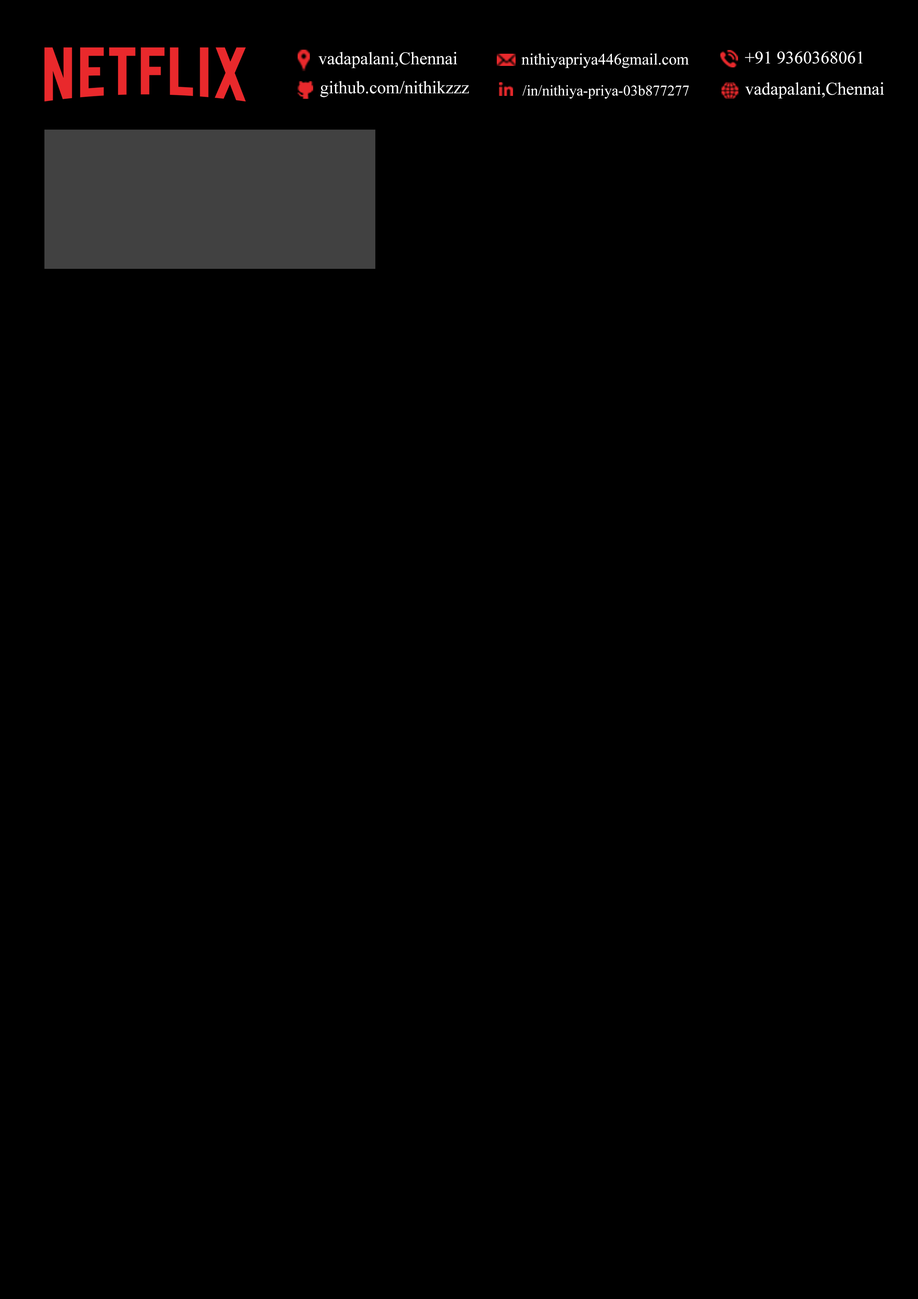
<style>
.page{position:relative;width:918px;height:1299px;background:#000000}
.page>*{position:absolute;margin:0}
.t1{font:17.7px "TimesNewRomanPSMT";color:#ffffff}
.t2{font:15.9px "TimesNewRomanPSMT";color:#ffffff}
.t3{font:14.8px "TimesNewRomanPSMT";color:#ffffff}
</style>
<div class="page">
<p class="t1" style="left:318px;top:52px;width:139px;height:16px">vadapalani,Chennai</p>
<p class="t2" style="left:521px;top:53px;width:168px;height:15px">nithiyapriya446gmail.com</p>
<p class="t1" style="left:745px;top:51px;width:118px;height:13px">+91 9360368061</p>
<p class="t1" style="left:320px;top:81px;width:149px;height:16px">github.com/nithikzzz</p>
<p class="t3" style="left:522px;top:85px;width:167px;height:14px">/in/nithiya-priya-03b877277</p>
<p class="t1" style="left:745px;top:82px;width:139px;height:16px">vadapalani,Chennai</p>
</div>
